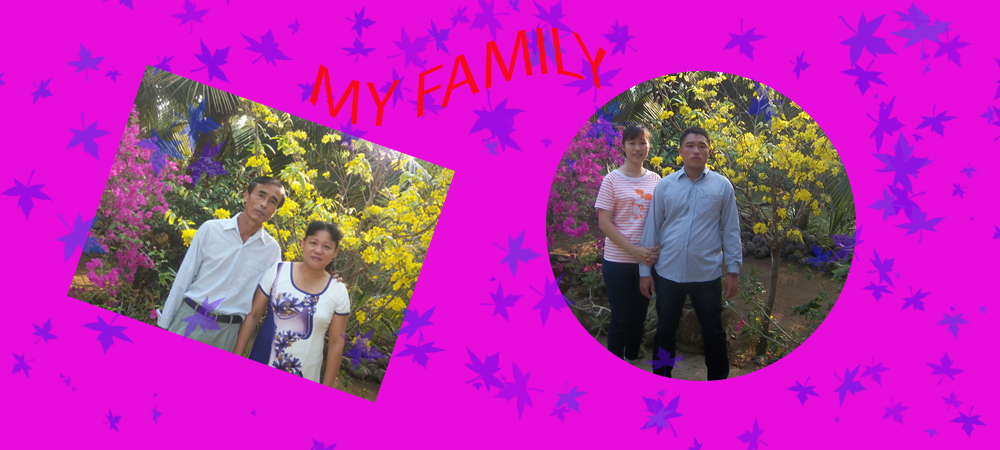
<style>
.page{position:relative;width:1000px;height:450px;background:#e70dda}
.page>*{position:absolute;margin:0}
.t1{font:66.7px "MyriadPro-Regular";color:#f30b1c}
</style>
<div class="page">
<p class="t1" style="left:309px;top:27px;width:298px;height:99px">MY FAMILY</p>
</div>
